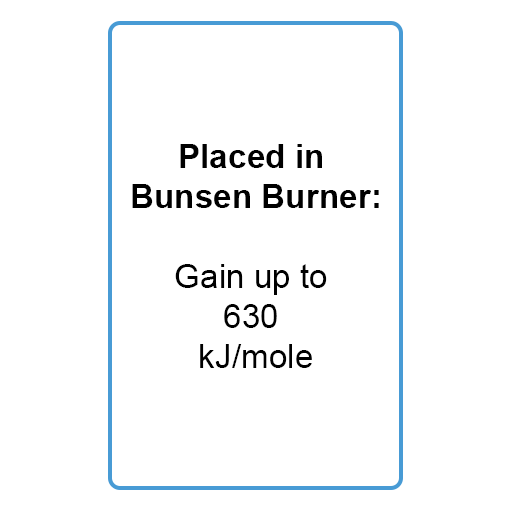
<style>
.page{position:relative;width:512px;height:512px;background:#ffffff}
.page>*{position:absolute;margin:0}
.t1{font:33.3px "Arial-BoldMT";color:#000000}
.t2{font:33.3px "ArialMT";color:#000000}
</style>
<div class="page">
<p class="t1" style="left:132px;top:144px;width:247px;height:224px;text-align:center">Placed in <br>Bunsen Burner:<br><span class="t2"><br>Gain up to <br>630 <br>kJ/mole</span></p>
</div>
